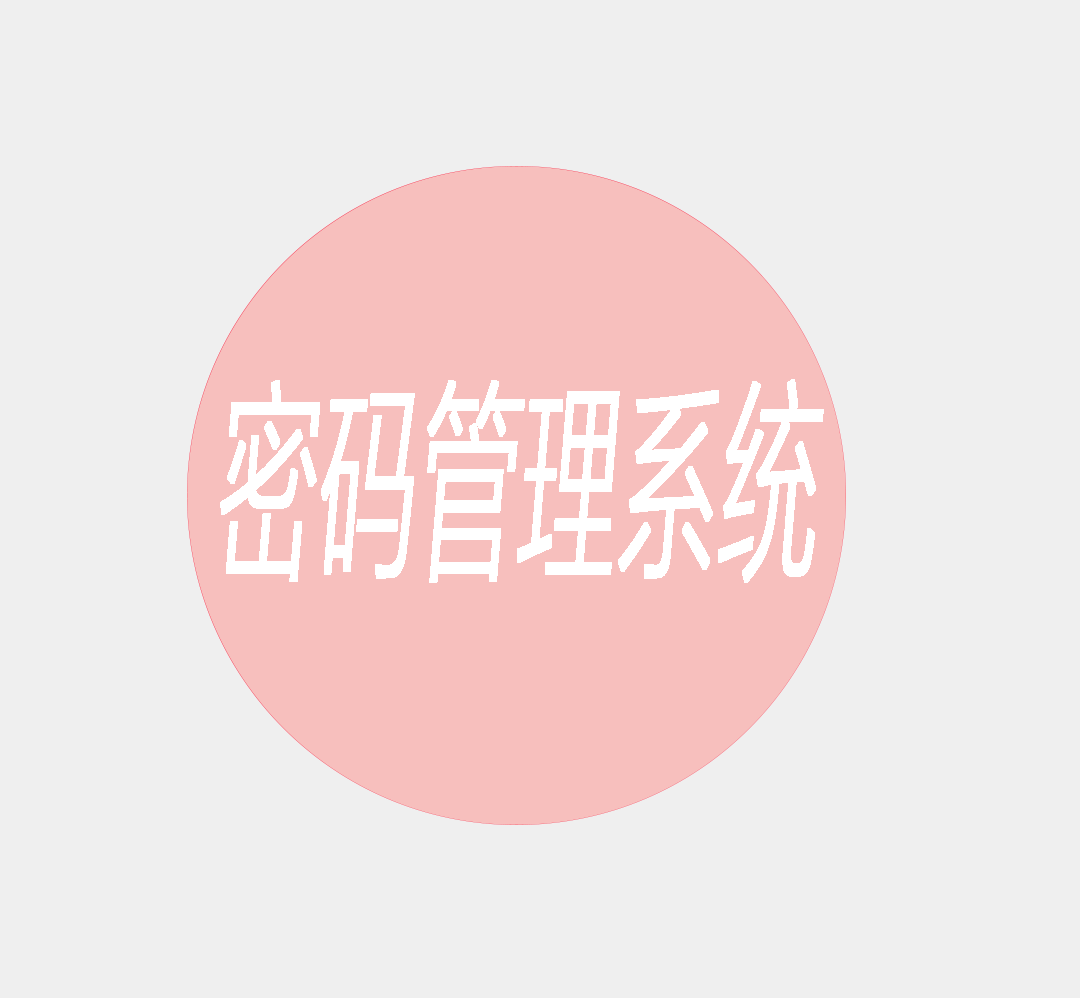
<style>
.page{position:relative;width:1080px;height:998px;background:#efefef}
.page>*{position:absolute;margin:0}
.t1{font:211.7px "MicrosoftYaHeiLight";color:#ffffff;font-weight:bold;font-style:italic;scale:0.46 1}
</style>
<div class="page">
<p class="t1" style="left:220px;top:379px;width:604px;height:204px">密码管理系统</p>
</div>
